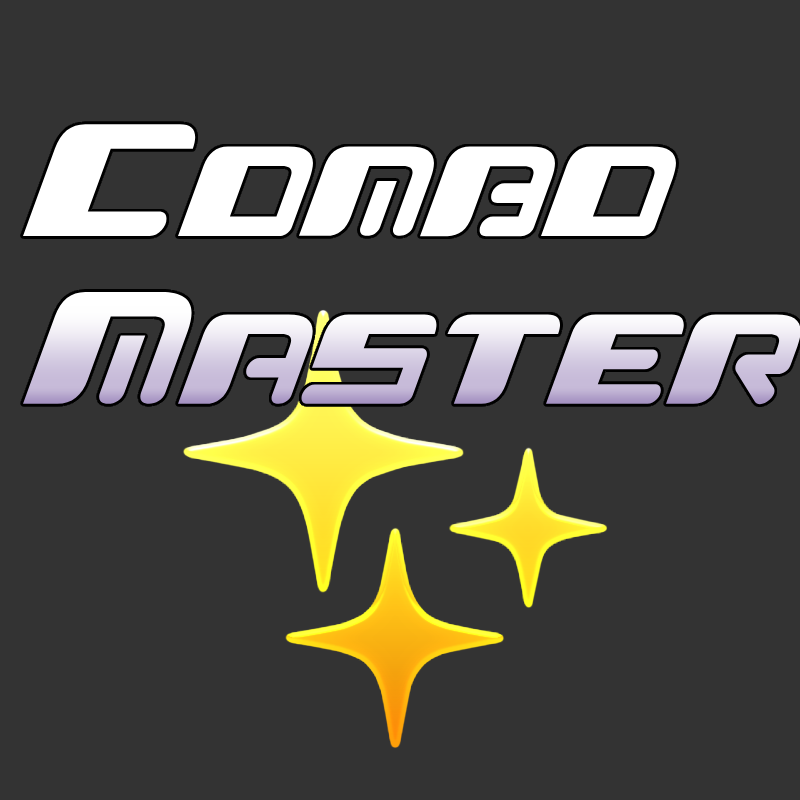
<style>
.page{position:relative;width:800px;height:800px;background:#333333}
.page>*{position:absolute;margin:0}
.t1{font:140px "KHGummi-Regular";color:#ffffff}
</style>
<div class="page">
<p class="t1" style="left:23px;top:124px;width:778px;height:281px">Combo<br>Master</p>
</div>
